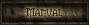
<style>
.page{position:relative;width:89px;height:25px}
.page>*{position:absolute;margin:0}
.t1{font:11px "Morpheus";color:#341f02}
</style>
<div class="page">
<p class="t1" style="left:26px;top:8px;width:37px;height:10px">Manual</p>
</div>
